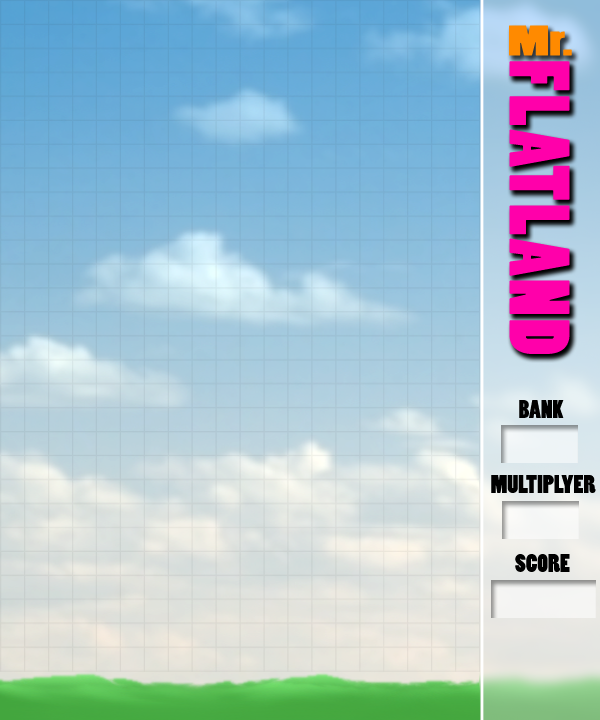
<style>
.page{position:relative;width:600px;height:720px}
.page>*{position:absolute;margin:0}
.t1{font:40px "PoplarStd";color:#ff8a00;scale:1.5 1}
.t2{font:80px "PoplarStd";letter-spacing:0.04em;color:#ff00aa;scale:0.95 1}
.t3{font:24px "PoplarStd";color:#000000}
</style>
<div class="page">
<p class="t1" style="left:509px;top:25px;width:63px;height:31px">Mr.</p>
<p class="t2" style="left:509px;top:61px;width:61px;height:293px;rotate:90deg">FLATLAND</p>
<p class="t3" style="left:519px;top:400px;width:45px;height:18px">BANK</p>
<p class="t3" style="left:491px;top:475px;width:105px;height:18px">MULTIPLYER</p>
<p class="t3" style="left:515px;top:554px;width:55px;height:18px">SCORE</p>
</div>
